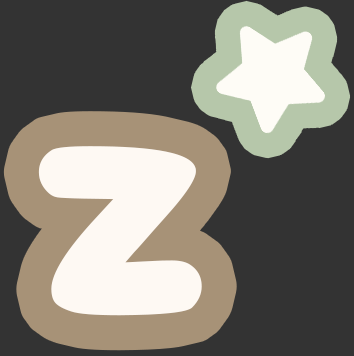
<style>
.page{position:relative;width:354px;height:356px;background:#333333}
.page>*{position:absolute;margin:0}
.t1{font:479.8px "Winkle-Regular";letter-spacing:0.05em;color:#fef9f3}
</style>
<div class="page">
<p class="t1" style="left:38px;top:146px;width:164px;height:170px">z</p>
</div>
